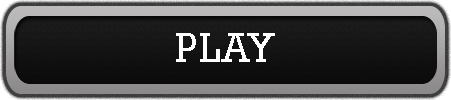
<style>
.page{position:relative;width:451px;height:100px}
.page>*{position:absolute;margin:0}
.t1{font:41.7px "Rockwell";color:#ffffff}
</style>
<div class="page">
<p class="t1" style="left:176px;top:33px;width:99px;height:29px">PLAY</p>
</div>
